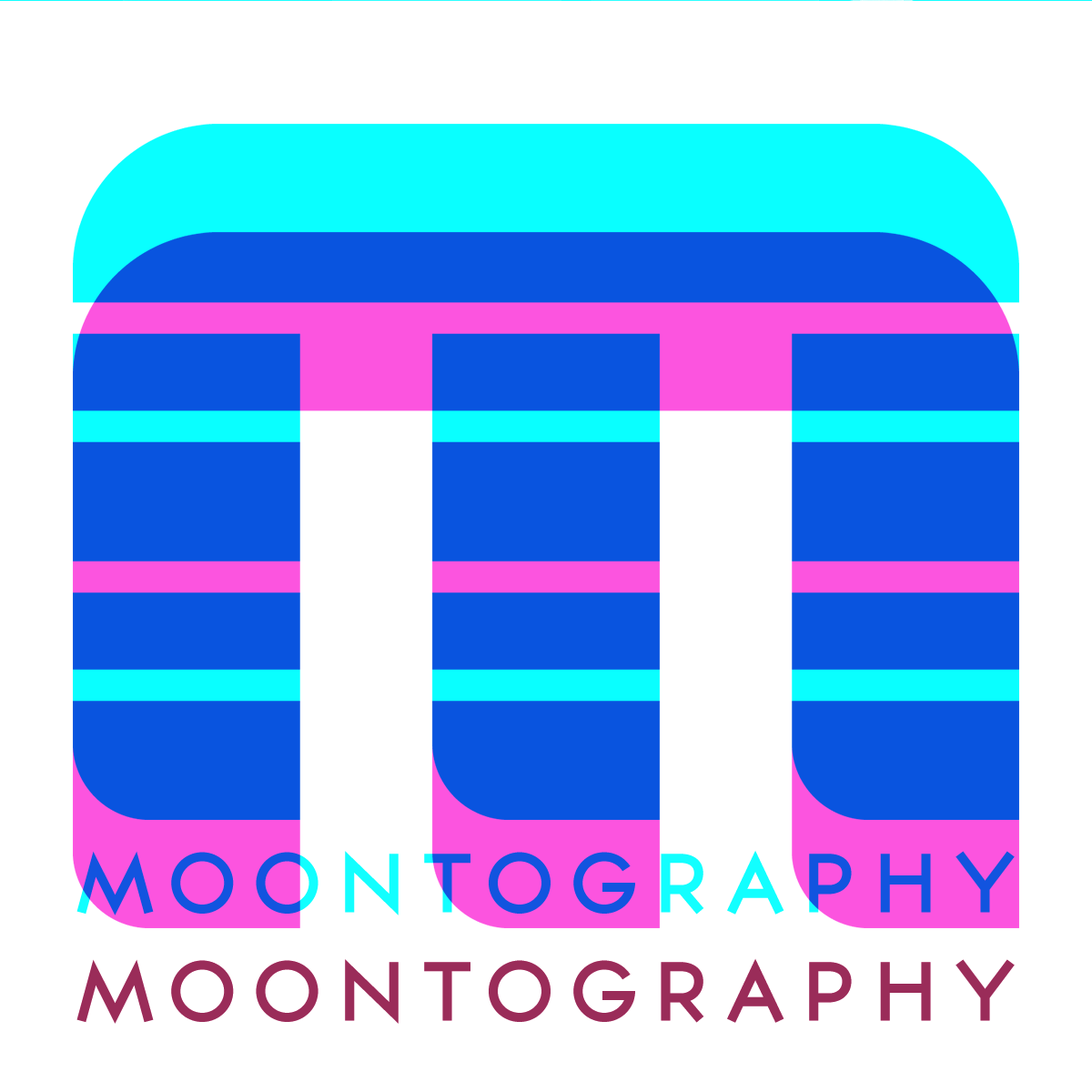
<style>
.page{position:relative;width:1092px;height:1092px;background:#ffffff}
.page>*{position:absolute;margin:0}
.t1{font:75.8px "TYPOGRAPHPRO-SemiBold";letter-spacing:0.2em}
</style>
<div class="page">
<p class="t1" style="left:76px;top:849px;width:939px;height:66px">MOONTOGRAPHY</p>
</div>
